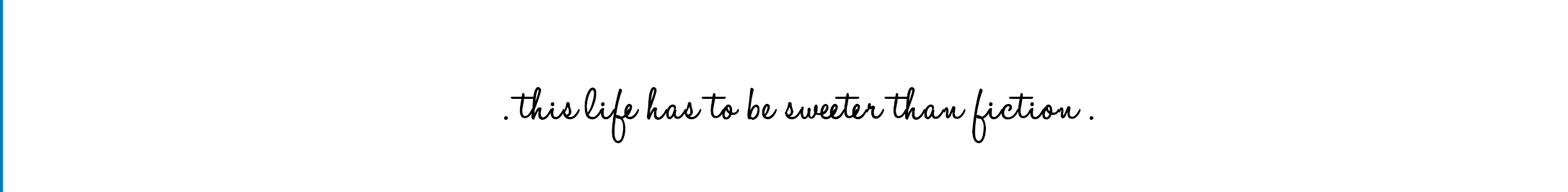
<style>
.page{position:relative;width:1568px;height:192px;background:#ffffff}
.page>*{position:absolute;margin:0}
.t1{font:57.7px "HaloHandletter";color:#000000;font-weight:bold}
</style>
<div class="page">
<p class="t1" style="left:504px;top:87px;width:589px;height:57px">. this life has to be sweeter than fiction .</p>
</div>
